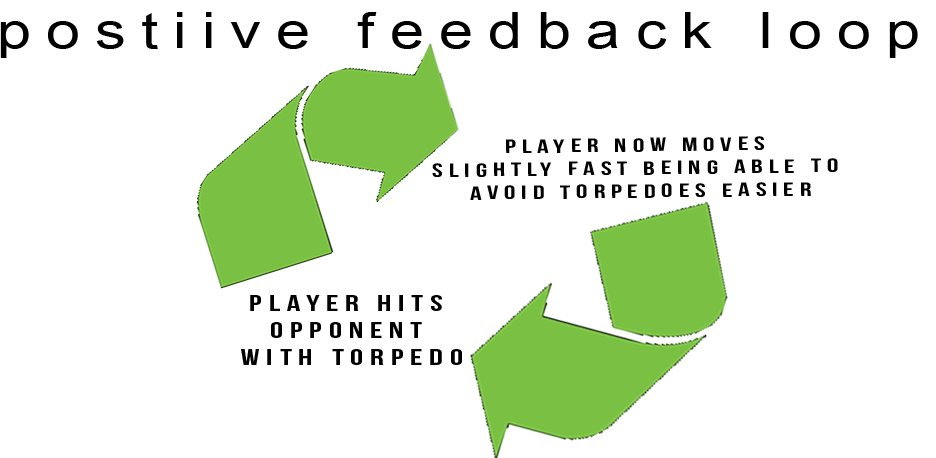
<style>
.page{position:relative;width:936px;height:458px;background:#ffffff}
.page>*{position:absolute;margin:0}
.t1{font:12px "ArialNarrow";letter-spacing:0.2em;color:#000000;scale:1.5 1}
.t2{font:19.2px "BebasNeue";letter-spacing:0.2em;color:#000000;scale:1.5 1}
.t3{font:22.5px "BebasNeue";letter-spacing:0.2em;color:#000000;scale:1.5 1}
</style>
<div class="page">
<p class="t1" style="left:0px;top:12px;width:918px;height:46px;text-align:center">postiive feedback loop</p>
<p class="t2" style="left:432px;top:136px;width:406px;height:64px;text-align:center;rotate:-1deg">player now moves <br>slightly fast being able to <br>avoid torpedoes easier</p>
<p class="t3" style="left:241px;top:295px;width:221px;height:70px;text-align:center">player hits <br>opponent <br>with torpedo</p>
</div>
